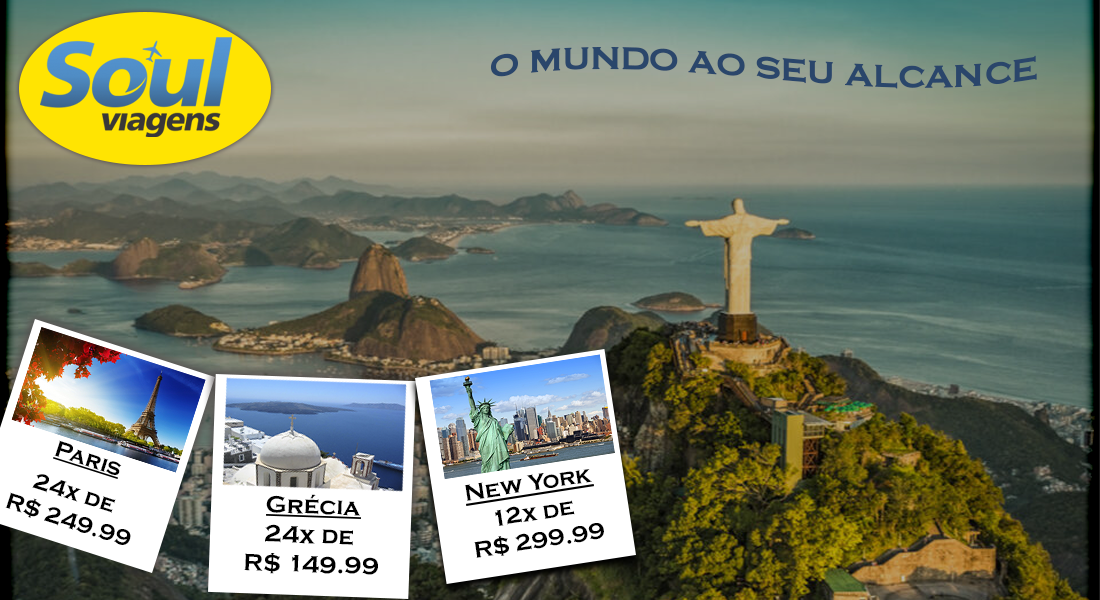
<style>
.page{position:relative;width:1100px;height:600px}
.page>*{position:absolute;margin:0}
.t1{font:40.6px "CopperplateGothic-Bold";color:#2a466b}
.t2{font:23.1px "CopperplateGothic-Bold";color:#000000}
.t3{font:23.4px "CopperplateGothic-Bold";color:#000000}
.t4{font:24.5px "CopperplateGothic-Bold";color:#000000}
</style>
<div class="page">
<p class="t1" style="left:490px;top:47px;width:547px;height:42px">o mundo ao seu alcance</p>
<p class="t2" style="left:54px;top:440px;width:68px;height:35px;rotate:18deg">Paris</p>
<p class="t3" style="left:464px;top:469px;width:128px;height:32px;rotate:-9deg">New York</p>
<p class="t2" style="left:5px;top:474px;width:126px;height:71px;text-align:center;rotate:18deg">24x de <br>R$ 249.99</p>
<p class="t4" style="left:266px;top:494px;width:94px;height:22px;rotate:2deg">Grécia</p>
<p class="t3" style="left:474px;top:500px;width:130px;height:58px;text-align:center;rotate:-9deg">12x de <br>R$ 299.99</p>
<p class="t4" style="left:244px;top:524px;width:134px;height:51px;text-align:center;rotate:2deg">24x de <br>R$ 149.99</p>
</div>
